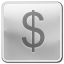
<style>
.page{position:relative;width:64px;height:64px}
.page>*{position:absolute;margin:0}
.t1{font:48px "ArialMT";color:#747474}
</style>
<div class="page">
<p class="t1" style="left:21px;top:10px;width:24px;height:42px">$</p>
</div>
